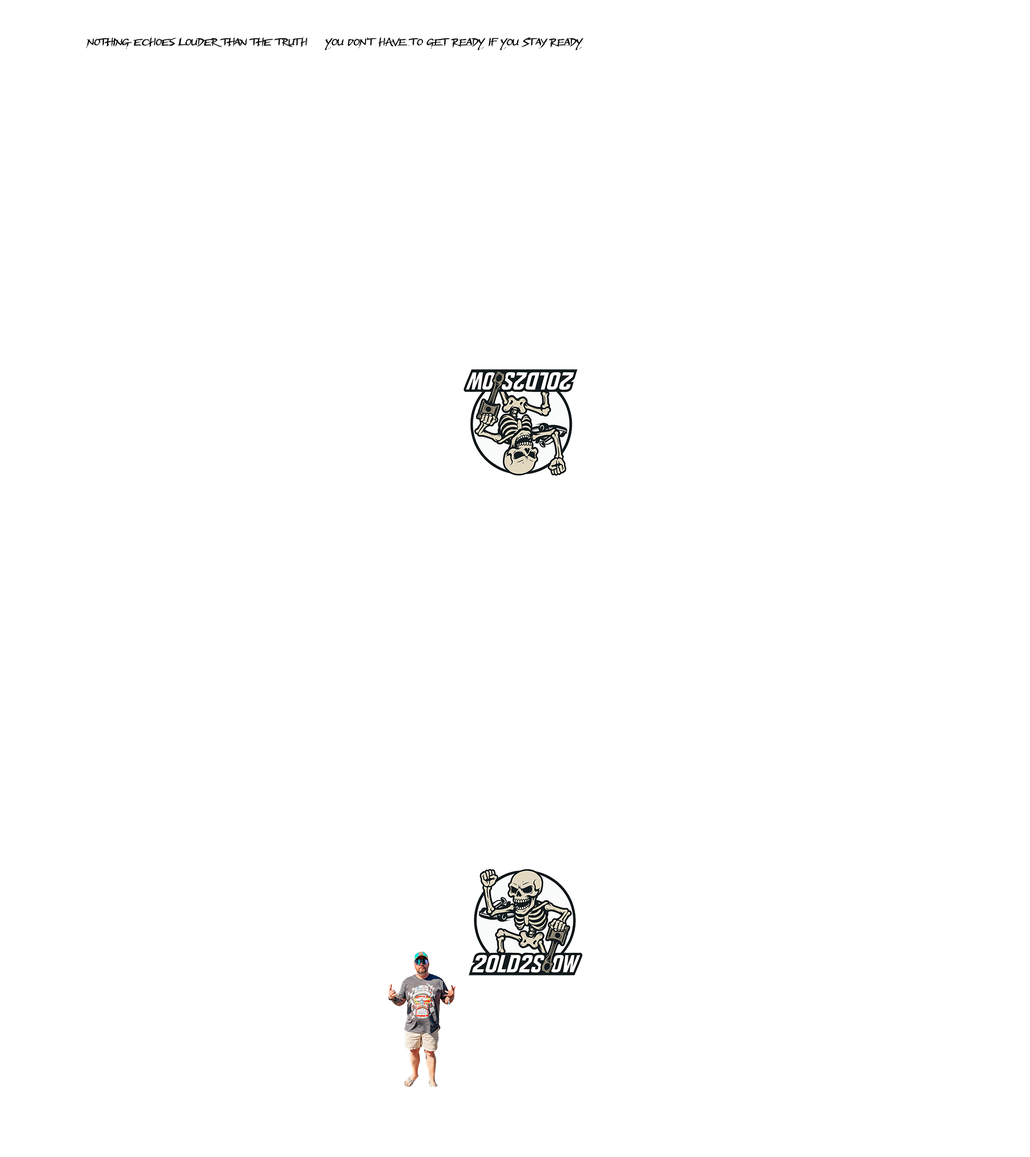
<style>
.page{position:relative;width:1030px;height:1157px;background:#ffffff}
.page>*{position:absolute;margin:0}
.t1{font:12.6px "BMXRadical";color:#000000}
</style>
<div class="page">
<p class="t1" style="left:86px;top:36px;width:222px;height:13px">Nothing echoes louder than the truth</p>
<p class="t1" style="left:325px;top:36px;width:259px;height:14px">You don’t have to get ready if you stay ready</p>
</div>
